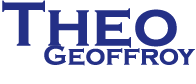
<style>
.page{position:relative;width:196px;height:84px;background:#ffffff}
.page>*{position:absolute;margin:0}
.t1{font:64.2px "CopperplateGothic-Bold";color:#243087}
.t2{font:28.2px "CopperplateGothic-Bold";color:#243087}
</style>
<div class="page">
<p class="t1" style="left:2px;top:0px;width:175px;height:48px">Theo</p>
<p class="t2" style="left:44px;top:45px;width:151px;height:21px">Geoffroy</p>
</div>
